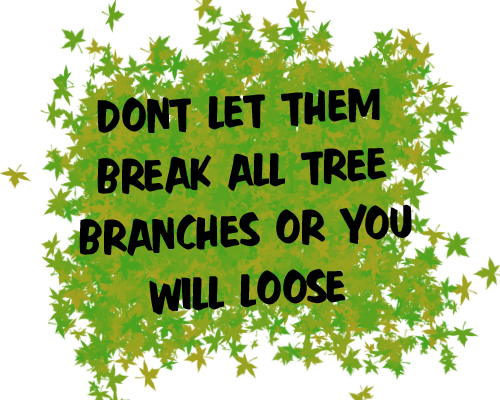
<style>
.page{position:relative;width:500px;height:400px;background:#ffffff}
.page>*{position:absolute;margin:0}
.t1{font:50px "FastAction";color:#000000}
</style>
<div class="page">
<p class="t1" style="left:79px;top:88px;width:333px;height:227px;text-align:center;rotate:-3deg">DONT LET THEM<br>BREAK ALL TREE<br>BRANCHES OR YOU<br>WILL LOOSE</p>
</div>
